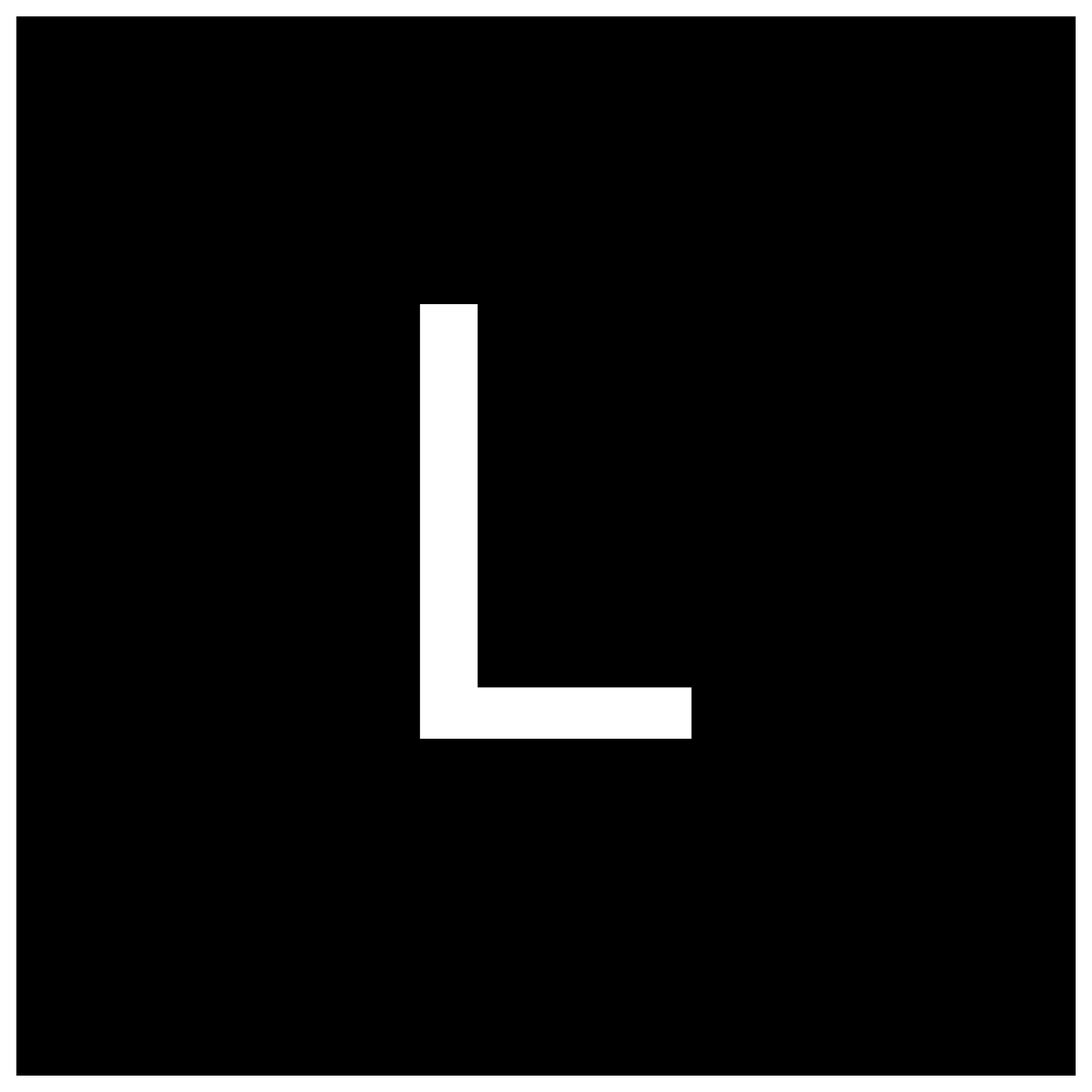
<style>
.page{position:relative;width:1092px;height:1092px;background:#000000}
.page>*{position:absolute;margin:0}
.t1{font:606.7px "ArialMT";color:#ffffff}
</style>
<div class="page">
<p class="t1" style="left:420px;top:304px;width:272px;height:435px">L</p>
</div>
